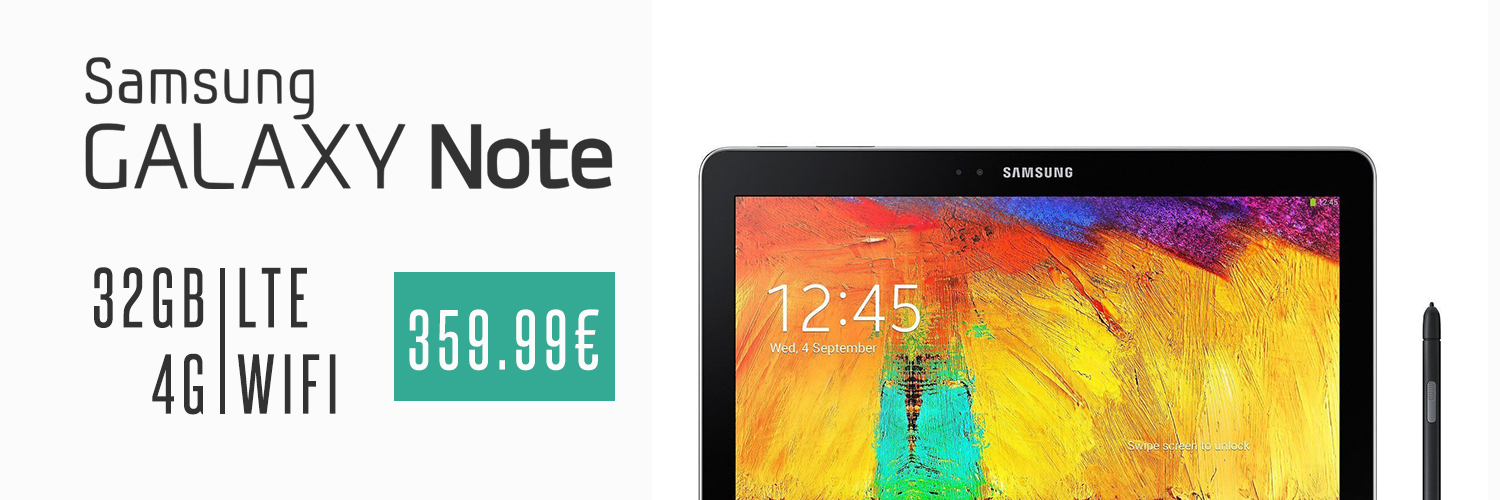
<style>
.page{position:relative;width:1500px;height:500px;background:#fbfbfb}
.page>*{position:absolute;margin:0}
.t1{font:72px "SteelfishRg-Regular";letter-spacing:0.1em;color:#323232}
.t2{font:72px "SteelfishRg-Regular";letter-spacing:0.1em;color:#fbfbfb}
</style>
<div class="page">
<p class="t1" style="left:94px;top:267px;width:110px;height:148px;text-align:right">32GB<br>4G</p>
<p class="t1" style="left:237px;top:267px;width:99px;height:147px">LTE<br>WIFI</p>
<p class="t2" style="left:409px;top:309px;width:190px;height:62px">359.99€</p>
</div>
